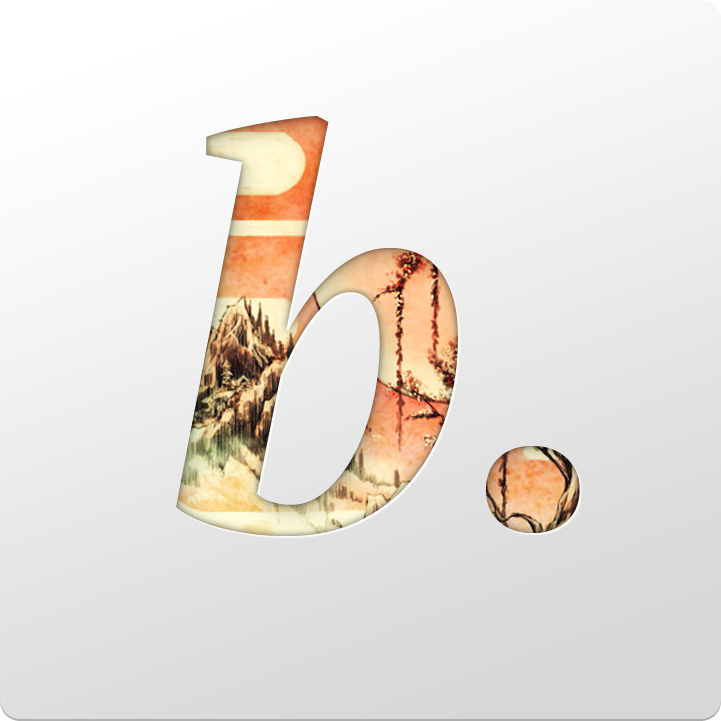
<style>
.page{position:relative;width:721px;height:721px}
.page>*{position:absolute;margin:0}
.t1{font:548.8px "PTSerif-BoldItalic"}
</style>
<div class="page">
<p class="t1" style="left:176px;top:116px;width:404px;height:420px">b.</p>
</div>
